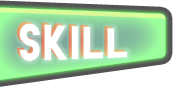
<style>
.page{position:relative;width:173px;height:87px;background:#ffffff}
.page>*{position:absolute;margin:0}
.t1{font:41.3px "LemonMilk";letter-spacing:0.05em;color:#ffffff}
</style>
<div class="page">
<p class="t1" style="left:19px;top:23px;width:109px;height:38px">Skill</p>
<p class="t1" style="left:19px;top:23px;width:109px;height:38px">Skill</p>
</div>
